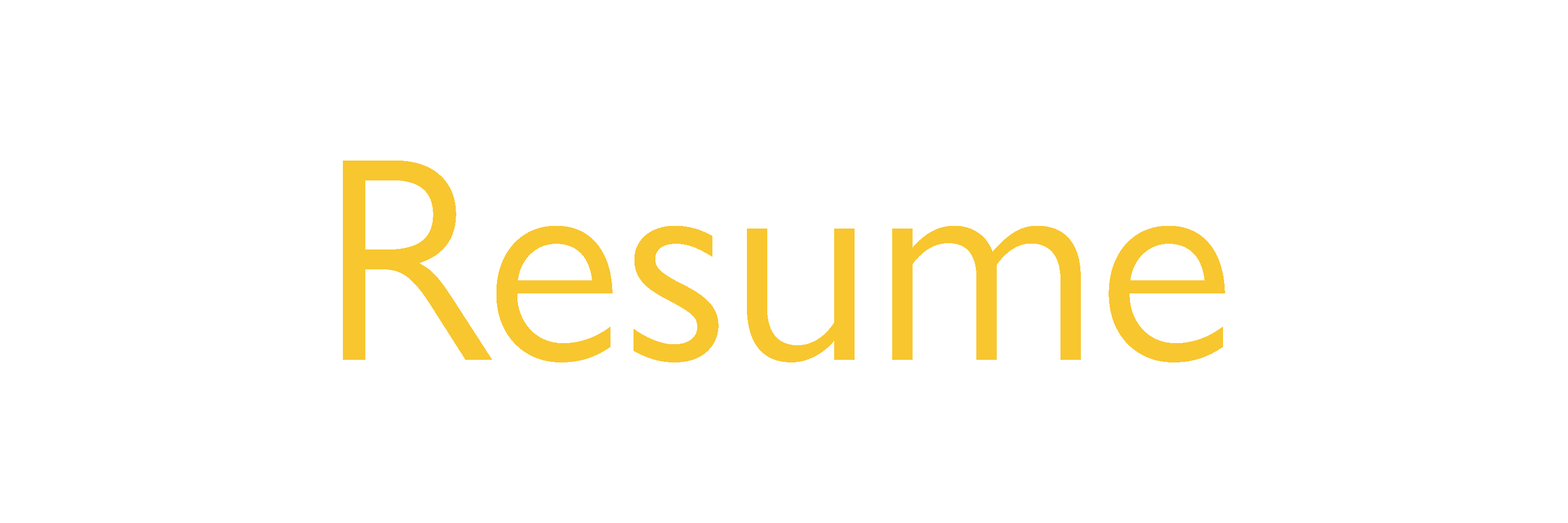
<style>
.page{position:relative;width:1568px;height:523px;background:#ffffff}
.page>*{position:absolute;margin:0}
.t1{font:291.2px "GillSansNova-Book";color:#f8c62e}
</style>
<div class="page">
<p class="t1" style="left:343px;top:160px;width:882px;height:202px">Resume</p>
</div>
